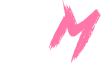
<style>
.page{position:relative;width:102px;height:64px;background:#ffffff}
.page>*{position:absolute;margin:0}
.t1{font:54.2px "RoadRage";letter-spacing:0.075em;color:#ff77a9}
</style>
<div class="page">
<p class="t1" style="left:48px;top:0px;width:53px;height:64px">M</p>
</div>
